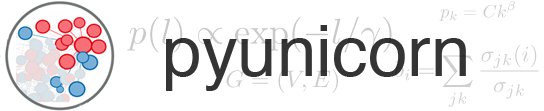
<style>
.page{position:relative;width:544px;height:111px;background:#ffffff}
.page>*{position:absolute;margin:0}
.t1{font:71.2px "Helvetica";color:#343434}
</style>
<div class="page">
<p class="t1" style="left:166px;top:25px;width:300px;height:66px">pyunicorn</p>
</div>
